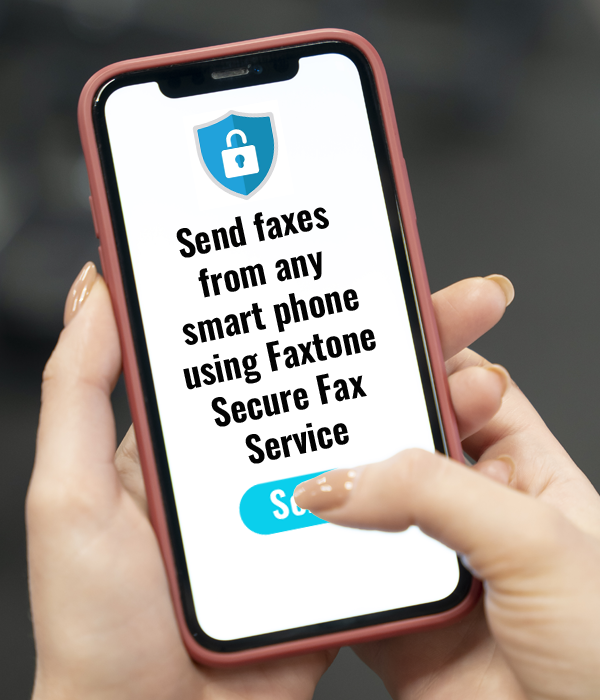
<style>
.page{position:relative;width:600px;height:700px}
.page>*{position:absolute;margin:0}
.t1{font:36px "Oswald-SemiBold";color:#030303}
</style>
<div class="page">
<p class="t1" style="left:176px;top:207px;width:200px;height:257px;text-align:center;rotate:-12deg">Send faxes<br>from any smart phone using Faxtone Secure Fax Service</p>
</div>
